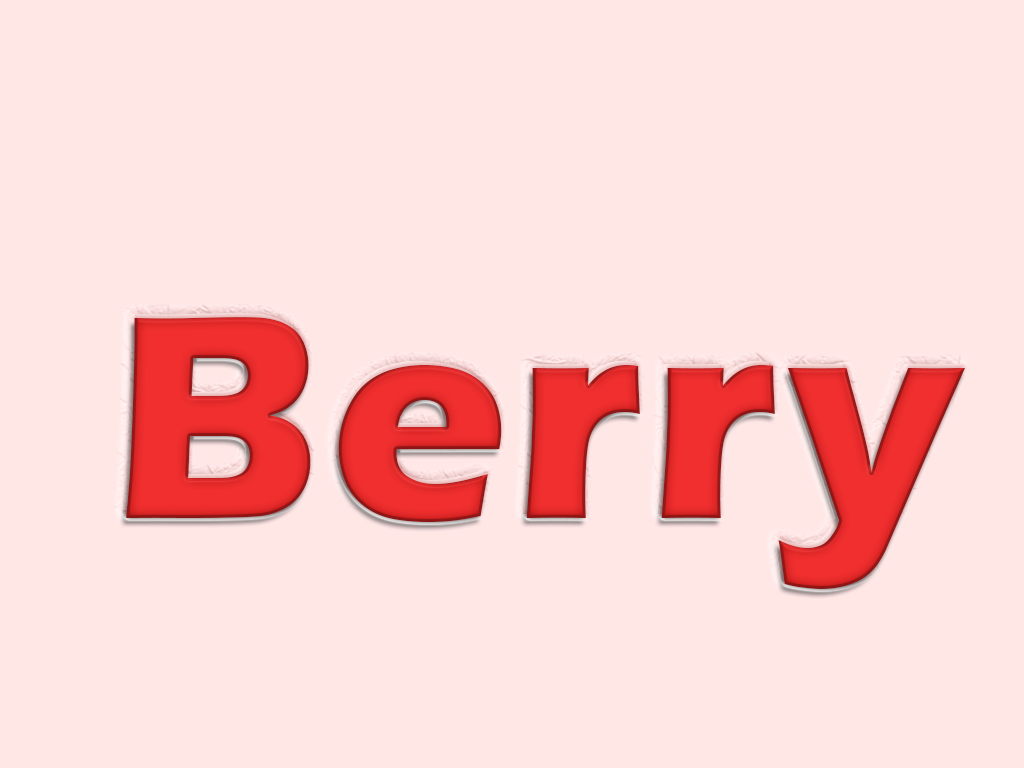
<style>
.page{position:relative;width:1024px;height:768px;background:#ffe7e6}
.page>*{position:absolute;margin:0}
.t1{font:300px "ErasITC-Bold";letter-spacing:0.02em;color:#f12f2f}
</style>
<div class="page">
<p class="t1" style="left:122px;top:313px;width:840px;height:272px">Berry</p>
<p class="t1" style="left:126px;top:317px;width:840px;height:272px">Berry</p>
</div>
